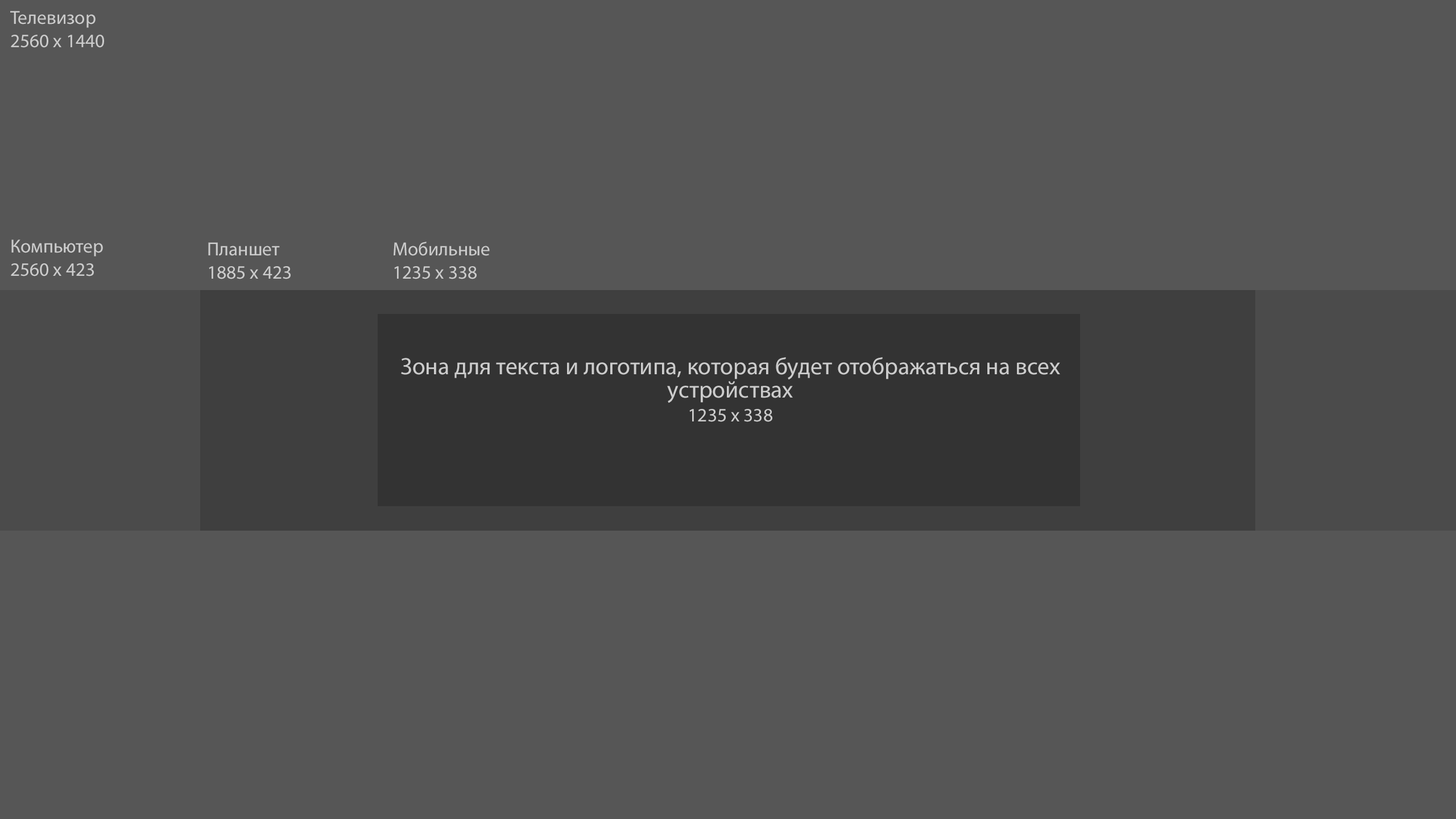
<style>
.page{position:relative;width:1456px;height:819px;background:#565656}
.page>*{position:absolute;margin:0}
.t1{font:19px/23.7px "MyriadPro-Regular";color:#cccccc}
.t2{font:23.7px/23.7px "MyriadPro-Regular";color:#cccccc}
</style>
<div class="page">
<p class="t1" style="left:10px;top:11px;width:94px;height:37px">Телевизор<br>2560 x 1440</p>
<p class="t1" style="left:11px;top:239px;width:92px;height:37px">Компьютер<br>2560 x 423</p>
<p class="t1" style="left:208px;top:242px;width:83px;height:37px">Планшет<br>1885 x 423</p>
<p class="t1" style="left:394px;top:242px;width:96px;height:37px">Мобильные<br>1235 x 338</p>
<p class="t2" style="left:401px;top:357px;width:659px;height:65px;text-align:center">Зона для текста и логотипа, которая будет отображаться на всех устройствах<br><span class="t1">1235 x 338</span></p>
</div>
